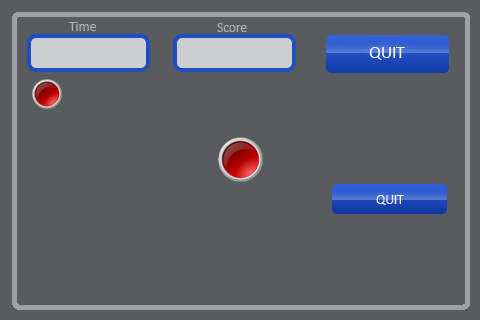
<style>
.page{position:relative;width:480px;height:320px;background:#585c5f}
.page>*{position:absolute;margin:0}
.t1{font:14px "Calibri";letter-spacing:-0.02em;color:#abb1b5}
.t2{font:18px "Calibri";letter-spacing:-0.02em;color:#f9fbfd}
.t3{font:14px "Calibri";letter-spacing:-0.02em;color:#ffffff}
</style>
<div class="page">
<p class="t1" style="left:69px;top:22px;width:27px;height:9px">Time</p>
<p class="t1" style="left:217px;top:23px;width:30px;height:9px">Score</p>
<p class="t2" style="left:369px;top:47px;width:36px;height:13px">QUIT</p>
<p class="t3" style="left:376px;top:195px;width:28px;height:10px">QUIT</p>
</div>
